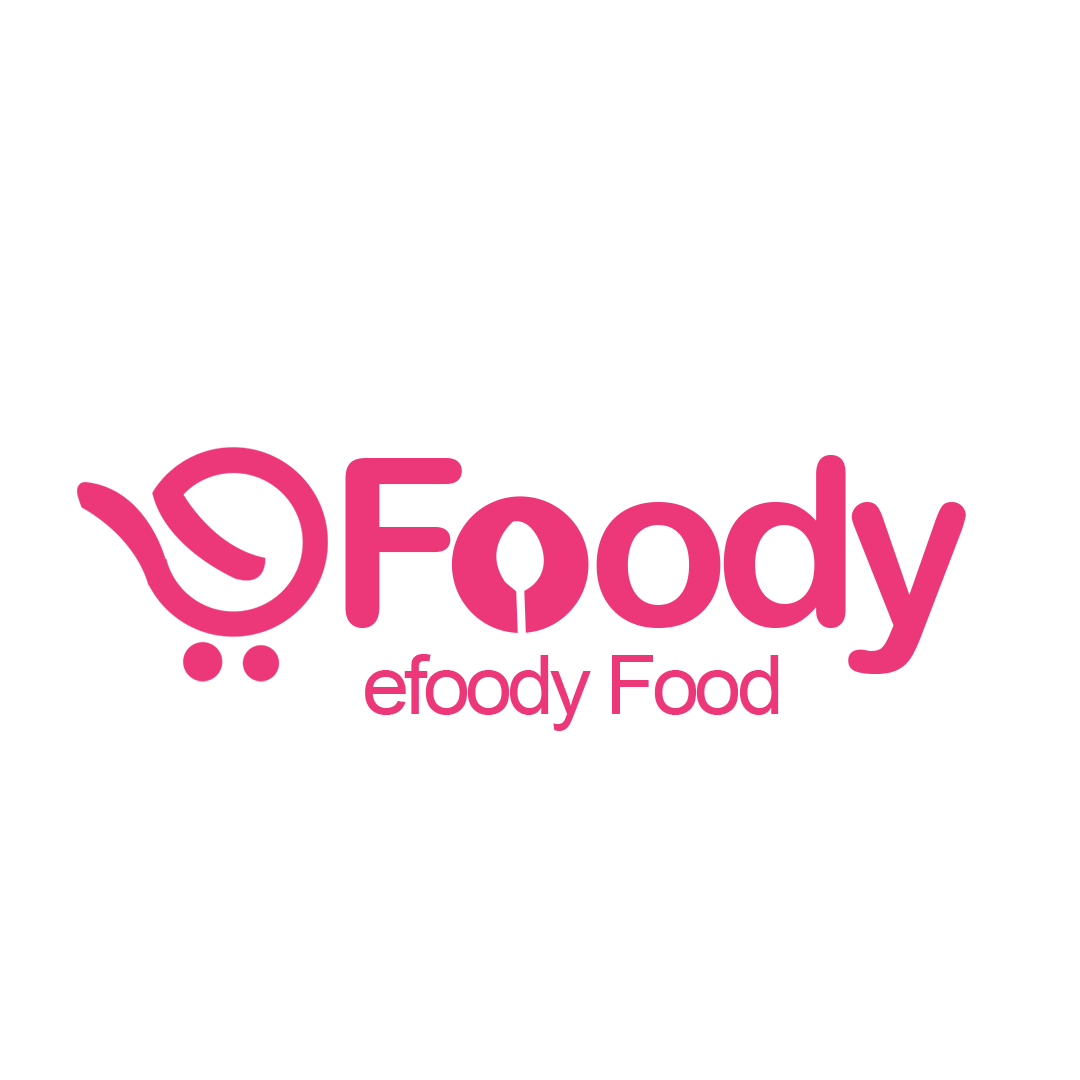
<style>
.page{position:relative;width:1080px;height:1080px;background:#ffffff}
.page>*{position:absolute;margin:0}
.t1{font:232.8px "ArialRoundedMTBold";letter-spacing:-0.06em;color:#ec3879}
.t2{font:82.2px "ArialMT";letter-spacing:-0.06em;color:#ec3879;scale:1.03 1}
</style>
<div class="page">
<p class="t1" style="left:345px;top:455px;width:621px;height:219px">F   ody</p>
<p class="t2" style="left:365px;top:654px;width:414px;height:77px">efoody Food</p>
</div>
